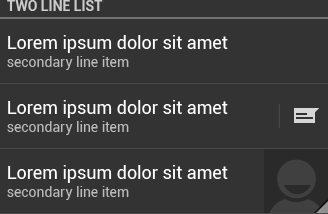
<style>
.page{position:relative;width:328px;height:214px;background:#333333}
.page>*{position:absolute;margin:0}
.t1{font:14px "Roboto-Bold";color:#cccccc}
.t2{font:18px/18px "Roboto-Regular";color:#ffffff}
.t3{font:14px/18px "Roboto-Regular";color:#bbbbbb}
</style>
<div class="page">
<p class="t1" style="left:7px;top:0px;width:96px;height:11px">TWO LINE LIST</p>
<p class="t2" style="left:7px;top:35px;width:221px;height:35px">Lorem ipsum dolor sit amet<br><span class="t3">secondary line item</span></p>
<p class="t2" style="left:7px;top:100px;width:221px;height:35px">Lorem ipsum dolor sit amet<br><span class="t3">secondary line item</span></p>
<p class="t2" style="left:7px;top:165px;width:221px;height:35px">Lorem ipsum dolor sit amet<br><span class="t3">secondary line item</span></p>
</div>
